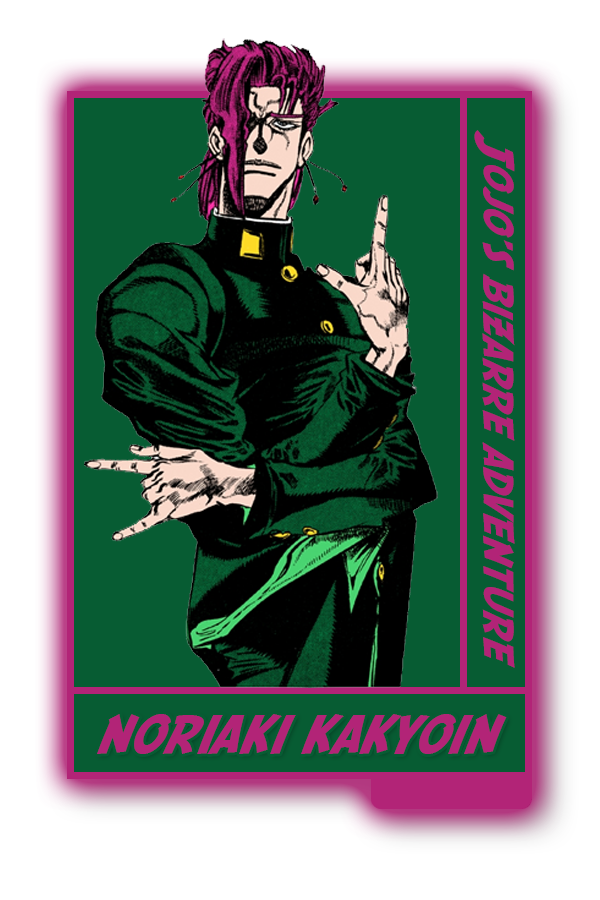
<style>
.page{position:relative;width:600px;height:900px;background:#075c33}
.page>*{position:absolute;margin:0}
.t1{font:42.4px "SFFedora";color:#b22477}
.t2{font:55.4px "SFFedora";color:#b22477}
</style>
<div class="page">
<p class="t1" style="left:474px;top:130px;width:41px;height:538px;rotate:90deg">Jojo's bizarre adventure</p>
<p class="t2" style="left:97px;top:714px;width:410px;height:40px">noriaki kakyoin</p>
</div>
